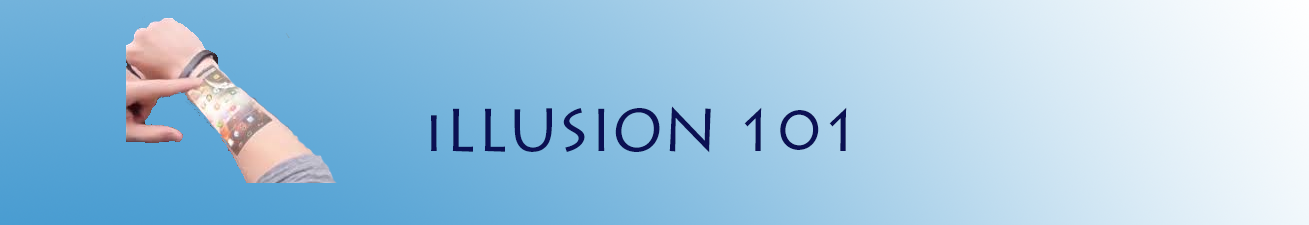
<style>
.page{position:relative;width:1309px;height:225px}
.page>*{position:absolute;margin:0}
.t1{font:60px "LithosPro-Regular";color:#0b1053}
.t2{font:60px "GiddyupStd";color:#ef5de3}
</style>
<div class="page">
<p class="t1" style="left:431px;top:106px;width:416px;height:47px"><span class="t2"><br></span>iLLUSION 101</p>
</div>
